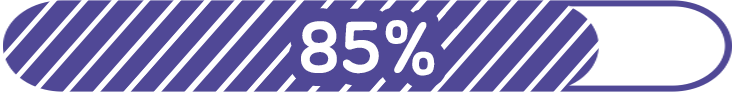
<style>
.page{position:relative;width:732px;height:96px;background:#504896}
.page>*{position:absolute;margin:0}
.t1{font:72px "BMJUA";color:#ffffff}
</style>
<div class="page">
<p class="t1" style="left:301px;top:20px;width:134px;height:56px">85%</p>
</div>
